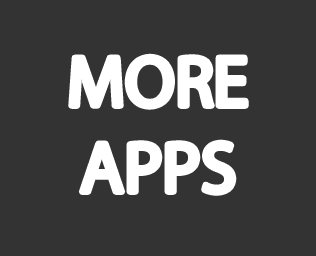
<style>
.page{position:relative;width:316px;height:256px;background:#333333}
.page>*{position:absolute;margin:0}
.t1{font:72px "MyriadPro-Regular";color:#ffffff}
</style>
<div class="page">
<p class="t1" style="left:71px;top:56px;width:175px;height:137px;text-align:center">MORE<br>APPS</p>
</div>
